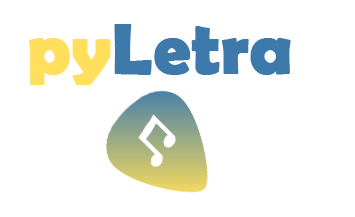
<style>
.page{position:relative;width:355px;height:217px;background:#ffffff}
.page>*{position:absolute;margin:0}
.t1{font:72px "BerlinSansFBDemi-Bold";color:#3d7aab;font-weight:bold}
.t2{font:72px "BerlinSansFBDemi-Bold";color:#ffdf5b;font-weight:bold}
</style>
<div class="page">
<p class="t1" style="left:28px;top:24px;width:263px;height:61px"><span class="t2">py</span>Letra</p>
</div>
